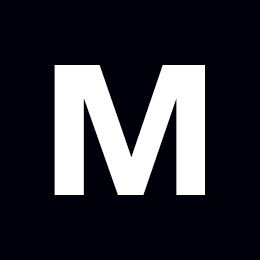
<style>
.page{position:relative;width:260px;height:260px;background:#00000b}
.page>*{position:absolute;margin:0}
.t1{font:200px "Play-Bold";color:#ffffff}
</style>
<div class="page">
<p class="t1" style="left:54px;top:65px;width:151px;height:130px">М</p>
</div>
